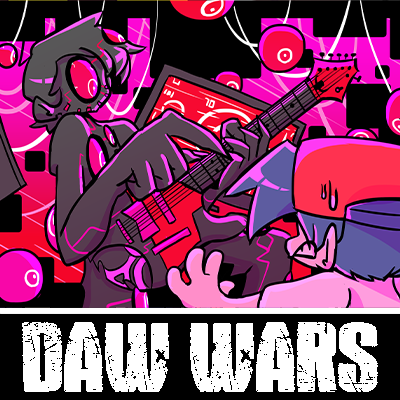
<style>
.page{position:relative;width:400px;height:400px;background:#000000}
.page>*{position:absolute;margin:0}
.t1{font:79.6px "Rock'sDeath";color:#ffffff;text-transform:uppercase}
</style>
<div class="page">
<p class="t1" style="left:22px;top:322px;width:356px;height:70px">DAW WARS</p>
</div>
